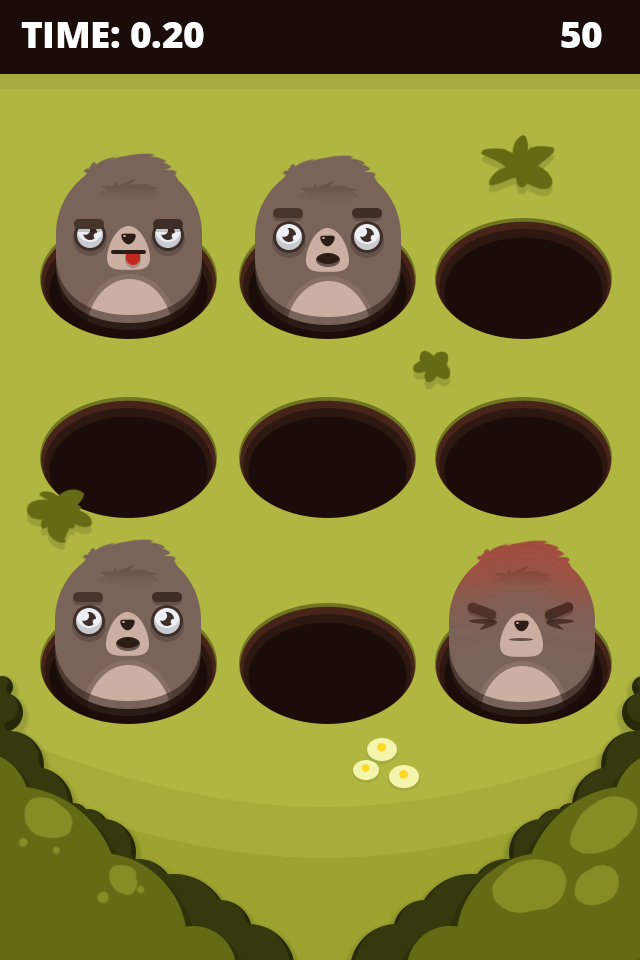
<style>
.page{position:relative;width:640px;height:960px;background:#b0b741}
.page>*{position:absolute;margin:0}
.t1{font:37px "OpenSans-Extrabold";letter-spacing:-0.01em;color:#ffffff;text-transform:uppercase}
</style>
<div class="page">
<p class="t1" style="left:21px;top:22px;width:183px;height:26px">Time: 0.20</p>
<p class="t1" style="left:561px;top:22px;width:41px;height:26px">50</p>
</div>
